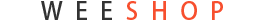
<style>
.page{position:relative;width:267px;height:21px;background:#ffffff}
.page>*{position:absolute;margin:0}
.t1{font:24px "AdobeHeitiStd-Regular";letter-spacing:0.52em;color:#f74f2e}
.t2{font:24px "AdobeHeitiStd-Regular";letter-spacing:0.52em;color:#333333}
</style>
<div class="page">
<p class="t1" style="left:41px;top:1px;width:182px;height:19px"><span class="t2">WEE</span>SHOP</p>
</div>
